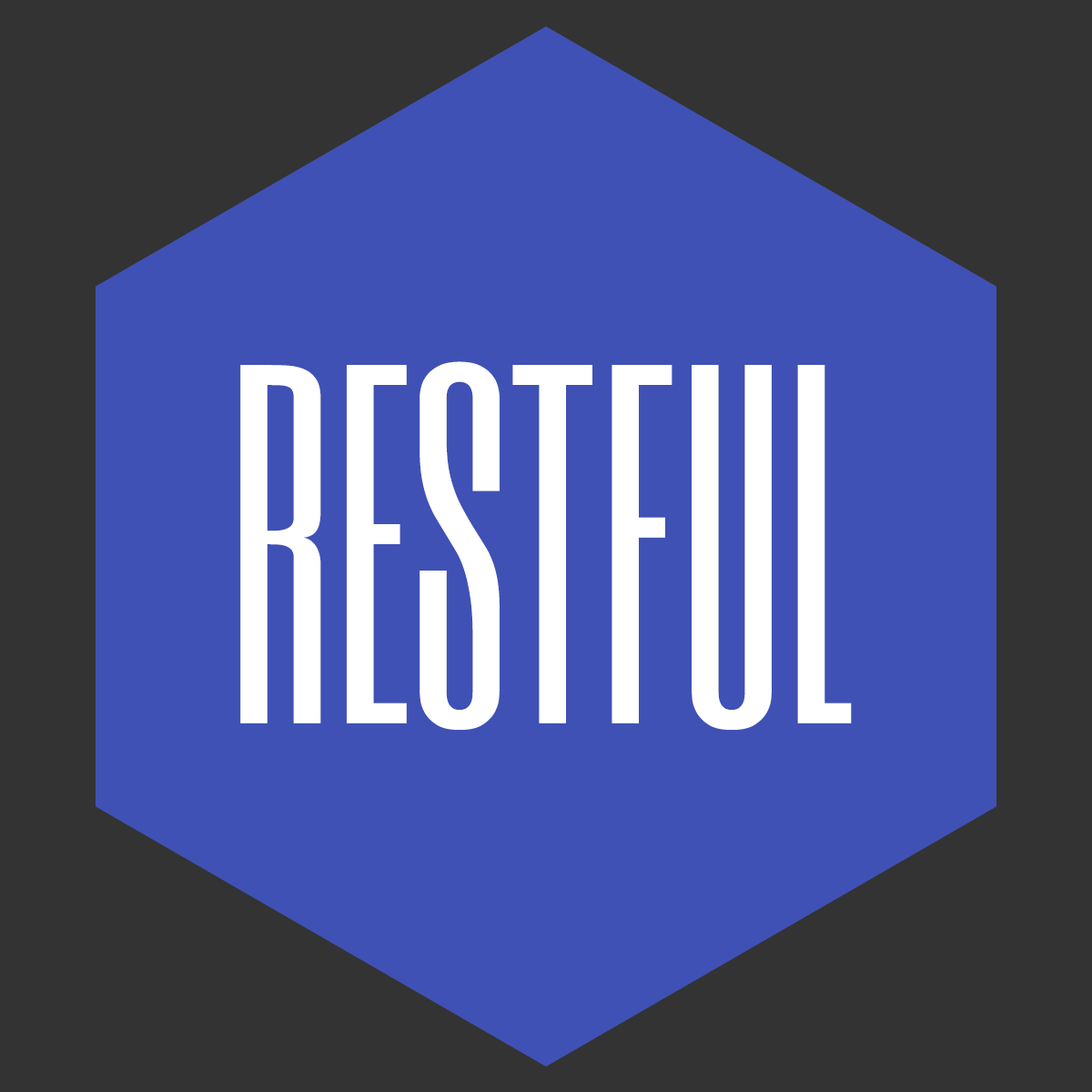
<style>
.page{position:relative;width:1092px;height:1092px;background:#3f51b5}
.page>*{position:absolute;margin:0}
.t1{font:424.6px "SixCaps";color:#ffffff}
</style>
<div class="page">
<p class="t1" style="left:240px;top:361px;width:612px;height:369px">RESTFUL</p>
</div>
